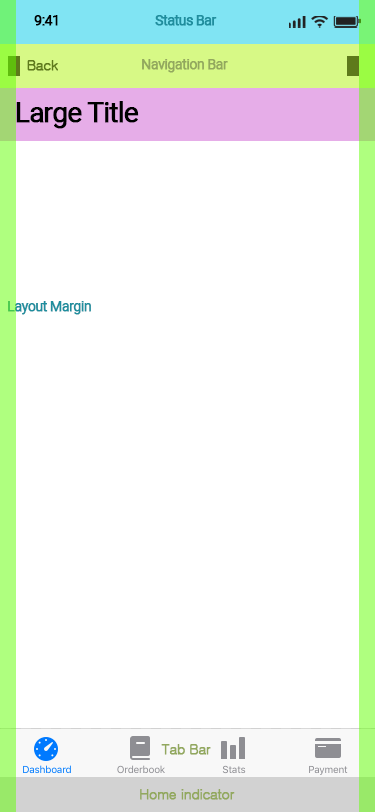
<style>
.page{position:relative;width:375px;height:812px;background:#ffffff}
.page>*{position:absolute;margin:0}
.t1{font:14px "Roboto-Regular";letter-spacing:-0.055em;color:#000000;font-weight:bold}
.t2{font:14px "Roboto-Regular";letter-spacing:-0.055em;color:#1f8e9e;font-weight:bold}
.t3{font:14px "Gulim";letter-spacing:-0.055em;color:#5e7a1b;font-weight:bold}
.t4{font:14px "Roboto-Regular";letter-spacing:-0.055em;color:#92a85e;font-weight:bold}
.t5{font:28px "Roboto-Regular";letter-spacing:-0.055em;color:#000000;font-weight:bold}
.t6{font:14px "Gulim";letter-spacing:-0.055em;color:#92a85e;font-weight:bold}
</style>
<div class="page">
<p class="t1" style="left:34px;top:15px;width:24px;height:11px">9:41</p>
<p class="t2" style="left:155px;top:15px;width:62px;height:11px">Status Bar</p>
<p class="t3" style="left:27px;top:60px;width:31px;height:11px">Back</p>
<p class="t4" style="left:142px;top:59px;width:86px;height:14px">Navigation Bar</p>
<p class="t5" style="left:16px;top:101px;width:123px;height:28px">Large Title</p>
<p class="t2" style="left:8px;top:301px;width:83px;height:14px">Layout Margin</p>
<p class="t6" style="left:161px;top:744px;width:50px;height:11px">Tab Bar</p>
<p class="t6" style="left:140px;top:789px;width:95px;height:11px">Home indicator</p>
</div>
